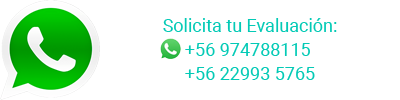
<style>
.page{position:relative;width:400px;height:100px;background:#ffffff}
.page>*{position:absolute;margin:0}
.t1{font:18px/24px "Roboto-Regular";color:#04cab6}
</style>
<div class="page">
<p class="t1" style="left:163px;top:18px;width:174px;height:62px;text-align:center">Solicita tu Evaluación:<br>+56 974788115 <br>+56 22993 5765</p>
</div>
